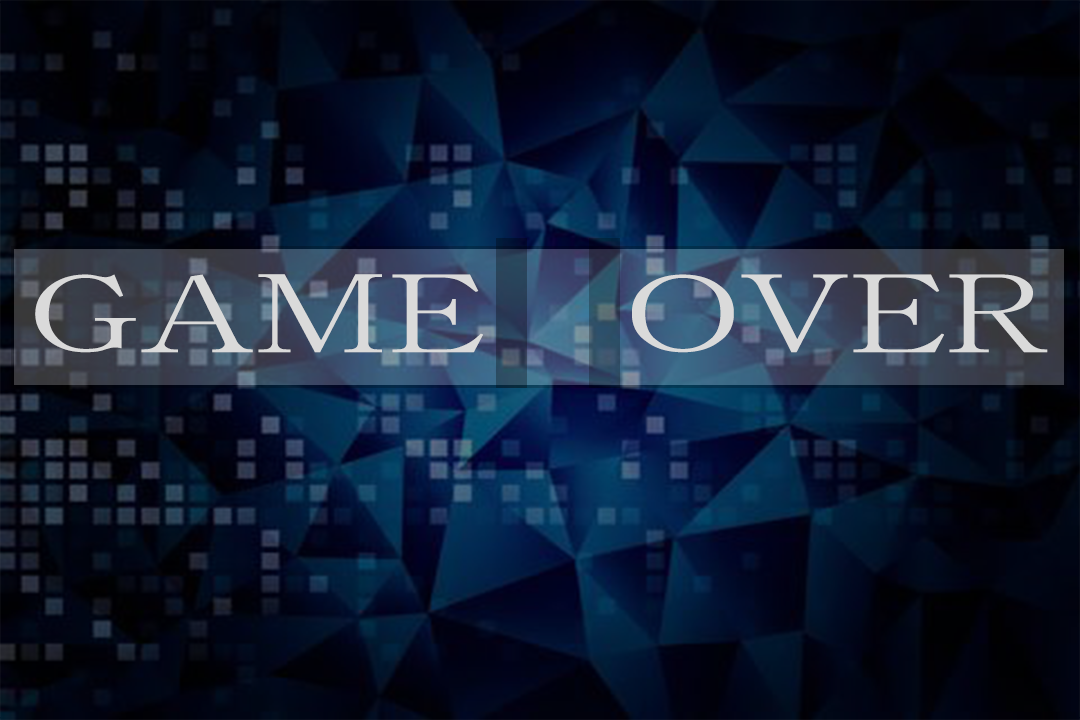
<style>
.page{position:relative;width:1080px;height:720px}
.page>*{position:absolute;margin:0}
.t1{font:112px "HGSeikaishotaiPRO";color:#dadada;scale:1.25 1}
</style>
<div class="page">
<p class="t1" style="left:35px;top:274px;width:1013px;height:79px">GAME　OVER</p>
</div>
